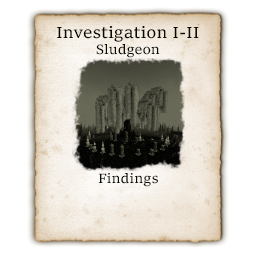
<style>
.page{position:relative;width:256px;height:256px;background:#ffffff}
.page>*{position:absolute;margin:0}
.t1{font:16.7px "Sitka-Small";color:#090901}
.t2{font:13.9px "Sitka-Small";color:#090901}
</style>
<div class="page">
<p class="t1" style="left:57px;top:26px;width:142px;height:32px;text-align:center">Investigation I-II<br><span class="t2">Sludgeon</span></p>
<p class="t2" style="left:98px;top:173px;width:60px;height:14px">Findings</p>
</div>
